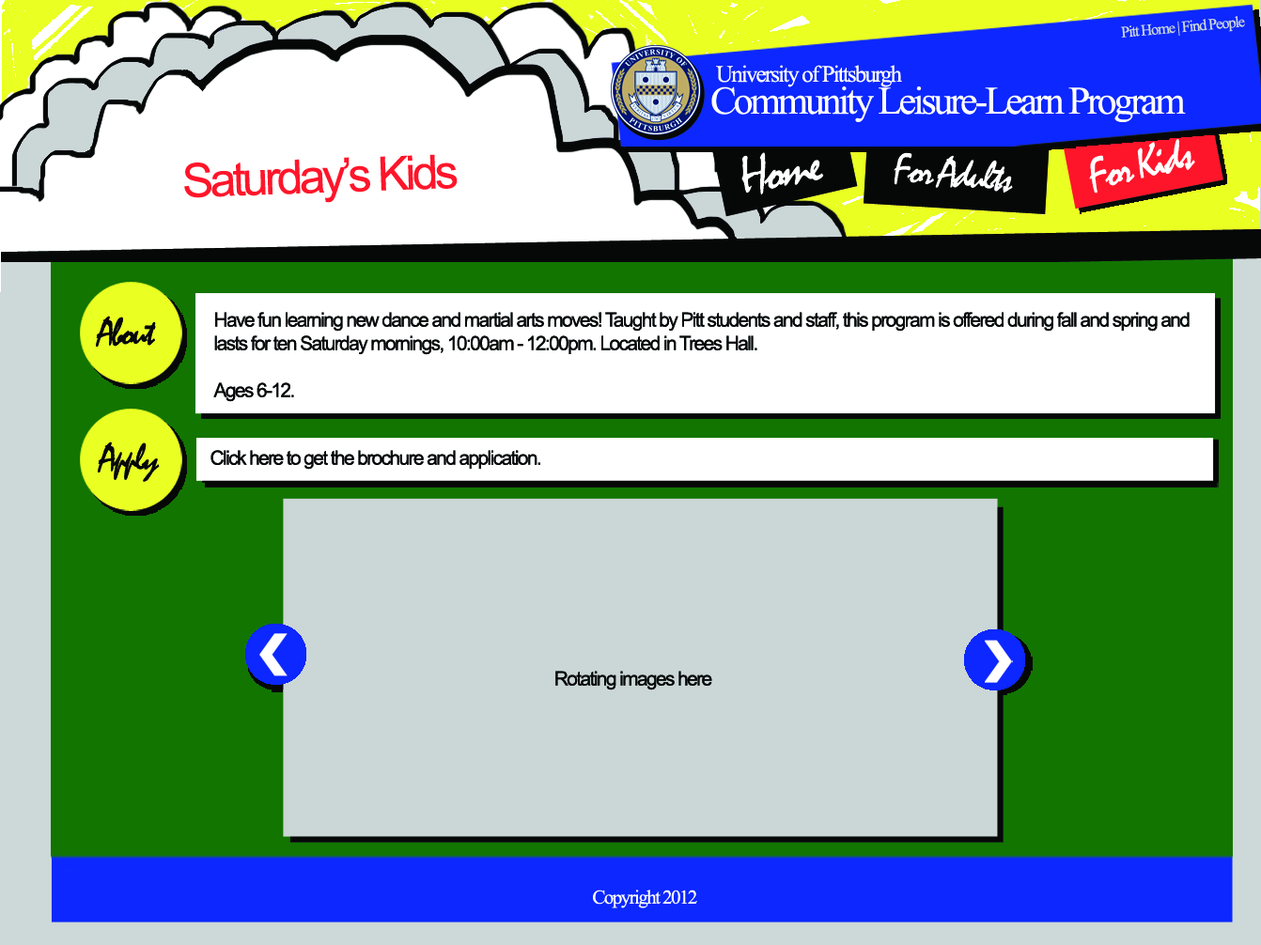
<style>
.page{position:relative;width:1261px;height:945px;background:#ffffff}
.page>*{position:absolute;margin:0}
.t1{font:15.7px "TimesNewRomanPSMT";letter-spacing:-0.075em;color:#cdd8d8}
.t2{font:23.5px "TimesNewRomanPSMT";letter-spacing:-0.075em;color:#ffffff}
.t3{font:39.2px "TimesNewRomanPSMT";letter-spacing:-0.075em;color:#ffffff}
.t4{font:47px "Mistral";letter-spacing:-0.075em;color:#ffffff}
.t5{font:47px "ArialMT";letter-spacing:-0.075em;color:#ff152a}
.t6{font:54.8px "Mistral";letter-spacing:-0.075em;color:#ffffff}
.t7{font:43.1px "Mistral";letter-spacing:-0.075em;color:#ffffff}
.t8{font:39.2px "Mistral";letter-spacing:-0.075em;color:#060808}
.t9{font:19.6px "ArialMT";letter-spacing:-0.075em;color:#060808}
.t10{font:19.6px "TimesNewRomanPSMT";letter-spacing:-0.075em;color:#ffffff}
</style>
<div class="page">
<p class="t1" style="left:1120px;top:16px;width:125px;height:22px;rotate:-5deg">Pitt Home | Find People</p>
<p class="t2" style="left:716px;top:65px;width:186px;height:22px">University of Pittsburgh</p>
<p class="t3" style="left:711px;top:86px;width:475px;height:36px">Community Leisure-Learn Program</p>
<p class="t4" style="left:1089px;top:139px;width:106px;height:55px;rotate:-13deg">For Kids</p>
<p class="t5" style="left:184px;top:154px;width:274px;height:49px;rotate:-2deg">Saturday’s Kids</p>
<p class="t6" style="left:742px;top:152px;width:82px;height:43px;rotate:-9deg">Home</p>
<p class="t7" style="left:894px;top:152px;width:119px;height:41px;rotate:5deg">For Adults</p>
<p class="t8" style="left:96px;top:316px;width:60px;height:31px">About</p>
<p class="t9" style="left:213px;top:312px;width:977px;height:90px">Have fun learning new dance and martial arts moves! Taught by Pitt students and staff, this program is offered during fall and spring and <br>lasts for ten Saturday mornings, 10:00am - 12:00pm. Located in Trees Hall.<br><br>Ages 6-12.</p>
<p class="t8" style="left:98px;top:442px;width:62px;height:40px">Apply</p>
<p class="t9" style="left:211px;top:450px;width:329px;height:20px">Click here to get the brochure and application.</p>
<p class="t9" style="left:555px;top:671px;width:157px;height:20px">Rotating images here</p>
<p class="t10" style="left:593px;top:890px;width:104px;height:19px">Copyright 2012</p>
</div>
